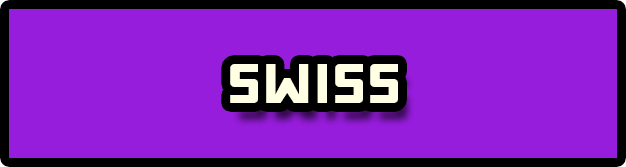
<style>
.page{position:relative;width:626px;height:167px;background:#971ddd}
.page>*{position:absolute;margin:0}
.t1{font:90px "ONRAMP";color:#ffffe3}
</style>
<div class="page">
<p class="t1" style="left:230px;top:64px;width:168px;height:39px">swiss</p>
</div>
